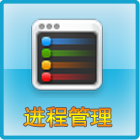
<style>
.page{position:relative;width:140px;height:140px}
.page>*{position:absolute;margin:0}
.t1{font:20.9px "SimHei";scale:1.07 1}
</style>
<div class="page">
<p class="t1" style="left:24px;top:107px;width:88px;height:20px">进程管理</p>
</div>
